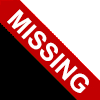
<style>
.page{position:relative;width:100px;height:100px;background:#ffffff}
.page>*{position:absolute;margin:0}
.t1{font:25px "Arial-BoldMT";color:#ffffff}
</style>
<div class="page">
<p class="t1" style="left:7px;top:9px;width:82px;height:84px;rotate:45deg">MISSING</p>
</div>
